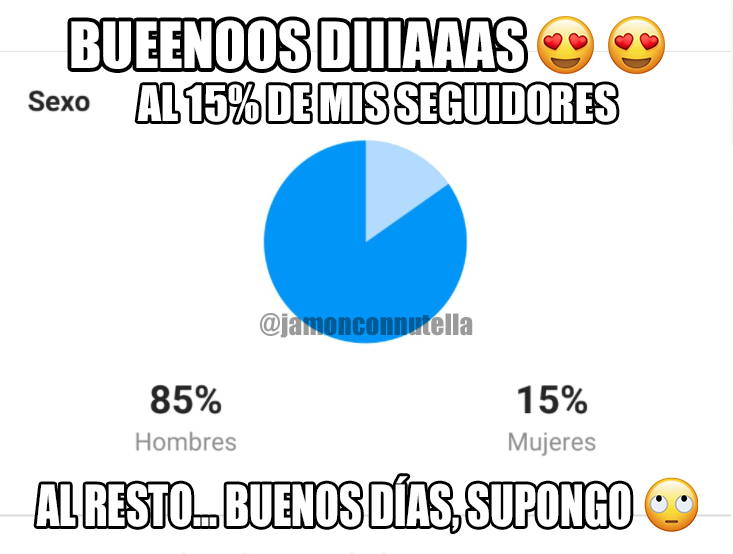
<style>
.page{position:relative;width:733px;height:554px;background:#ffffff}
.page>*{position:absolute;margin:0}
.t1{font:58.8px "Impact";color:#ffffff}
.t2{font:45.2px "Impact";color:#ffffff}
.t3{font:27.4px "Impact"}
.t4{font:52.5px "Impact";color:#ffffff;scale:0.84 1}
</style>
<div class="page">
<p class="t1" style="left:71px;top:20px;width:453px;height:49px">BUEENOOS DIIIAAAS</p>
<p class="t2" style="left:137px;top:84px;width:480px;height:38px">AL 15% DE MIS SEGUIDORES</p>
<p class="t3" style="left:260px;top:313px;width:213px;height:25px">@jamonconnutella</p>
<p class="t4" style="left:36px;top:476px;width:595px;height:56px">AL RESTO... BUENOS DÍAS, SUPONGO</p>
</div>
